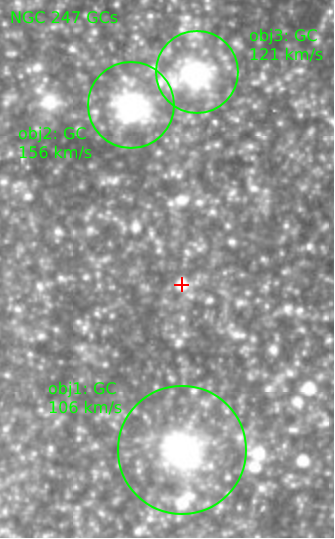
<style>
.page{position:relative;width:335px;height:539px}
.page>*{position:absolute;margin:0}
.t1{font:16px "DejaVuSans";color:#00ff00}
</style>
<div class="page">
<p class="t1" style="left:11px;top:11px;width:107px;height:13px">NGC 247 GCs</p>
<p class="t1" style="left:249px;top:28px;width:74px;height:34px">obj3: GC<br>121 km/s</p>
<p class="t1" style="left:18px;top:126px;width:74px;height:34px">obj2: GC<br>156 km/s</p>
<p class="t1" style="left:48px;top:381px;width:74px;height:34px">obj1: GC<br>106 km/s</p>
</div>
